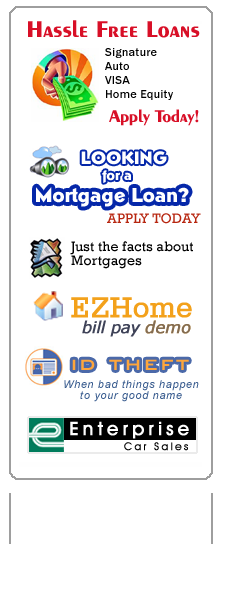
<style>
.page{position:relative;width:228px;height:600px;background:#ffffff}
.page>*{position:absolute;margin:0}
.t1{font:24px "Exotic350BT-Bold";letter-spacing:-0.01em;color:#d80f27}
.t2{font:12px/14px "FranklinGothic-Medium";letter-spacing:0.025em;color:#000000}
.t3{font:18px "Exotic350BT-Bold";letter-spacing:-0.025em;color:#d80f27}
.t4{font:18px "Pythagoras";letter-spacing:0.01em;color:#ffffff}
.t5{font:14px "Pythagoras";letter-spacing:0.01em;color:#ffffff}
.t6{font:20px "Pythagoras";letter-spacing:0.01em;color:#ffffff}
.t7{font:14px "Rockwell";letter-spacing:0.01em;color:#b72610}
.t8{font:14px/14px "Rockwell";letter-spacing:0.01em;color:#000000}
.t9{font:30px "SerifaBT-Roman";color:#f3a11b;font-weight:bold}
.t10{font:16px "Verdana-Italic";letter-spacing:-0.025em;color:#3f4358;font-weight:bold}
.t11{font:16px "Verdana-Italic";color:#826c54;font-weight:bold}
.t12{font:24px "BankGothicBT-Medium";letter-spacing:0.075em;color:#fea63c}
.t13{font:10.7px/10.7px "Arial-ItalicMT";letter-spacing:0.075em;color:#395c8f}
.t14{font:18.7px "AvantGardeITCbyBT-Medium";letter-spacing:0.2em;color:#ffffff;font-weight:bold}
.t15{font:10.7px "AvantGardeITCbyBT-Book";letter-spacing:0.2em;color:#000000;font-weight:bold}
</style>
<div class="page">
<p class="t1" style="left:28px;top:20px;width:172px;height:18px">Hassle Free Loans</p>
<p class="t2" style="left:105px;top:48px;width:68px;height:52px">Signature<br>Auto<br>VISA<br>Home Equity</p>
<p class="t3" style="left:109px;top:109px;width:90px;height:17px">Apply Today!</p>
<p class="t4" style="left:81px;top:150px;width:86px;height:15px">LOOKING</p>
<p class="t5" style="left:102px;top:170px;width:29px;height:13px">for a</p>
<p class="t6" style="left:36px;top:187px;width:153px;height:20px">Mortgage Loan?</p>
<p class="t7" style="left:107px;top:213px;width:94px;height:11px">APPLY TODAY</p>
<p class="t8" style="left:70px;top:241px;width:123px;height:28px">Just the facts about <br>Mortgages</p>
<p class="t9" style="left:71px;top:297px;width:121px;height:21px">EZHome</p>
<p class="t10" style="left:82px;top:320px;width:59px;height:17px">bill pay</p>
<p class="t11" style="left:145px;top:320px;width:46px;height:14px">demo</p>
<p class="t11" style="left:145px;top:320px;width:46px;height:14px">demo</p>
<p class="t12" style="left:72px;top:359px;width:117px;height:11px">id theft</p>
<p class="t13" style="left:64px;top:380px;width:135px;height:22px;text-align:center">When bad things happen <br>to your good name</p>
<p class="t14" style="left:70px;top:421px;width:119px;height:18px">Enterprise</p>
<p class="t15" style="left:124px;top:442px;width:64px;height:9px">Car Sales</p>
</div>
